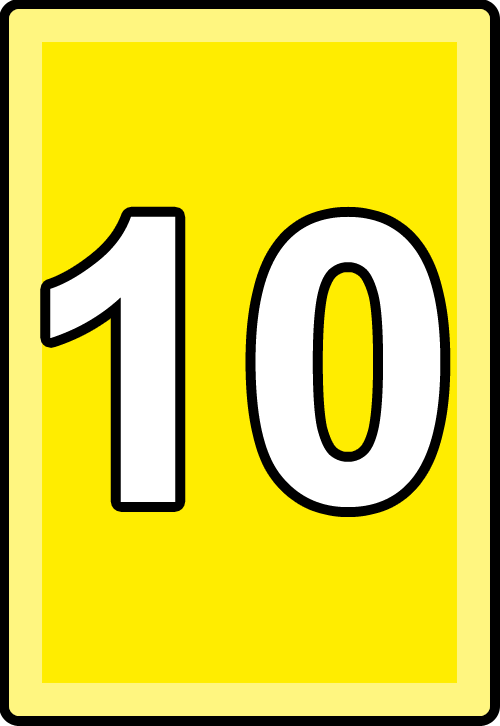
<style>
.page{position:relative;width:500px;height:726px;background:#ffed00}
.page>*{position:absolute;margin:0}
.t1{font:396.5px "Arial-BoldMT";color:#ffffff}
</style>
<div class="page">
<p class="t1" style="left:50px;top:216px;width:391px;height:291px">10</p>
</div>
